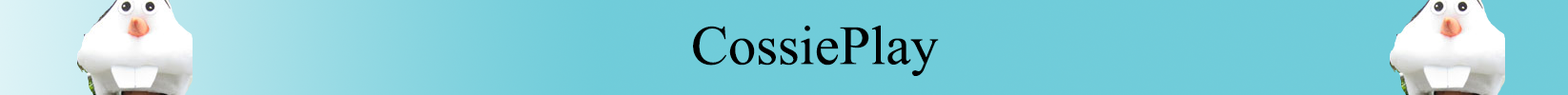
<style>
.page{position:relative;width:1568px;height:95px}
.page>*{position:absolute;margin:0}
.t1{font:55.6px "TimesNewRomanPSMT";color:#000000}
</style>
<div class="page">
<p class="t1" style="left:693px;top:25px;width:246px;height:51px">CossiePlay</p>
</div>
